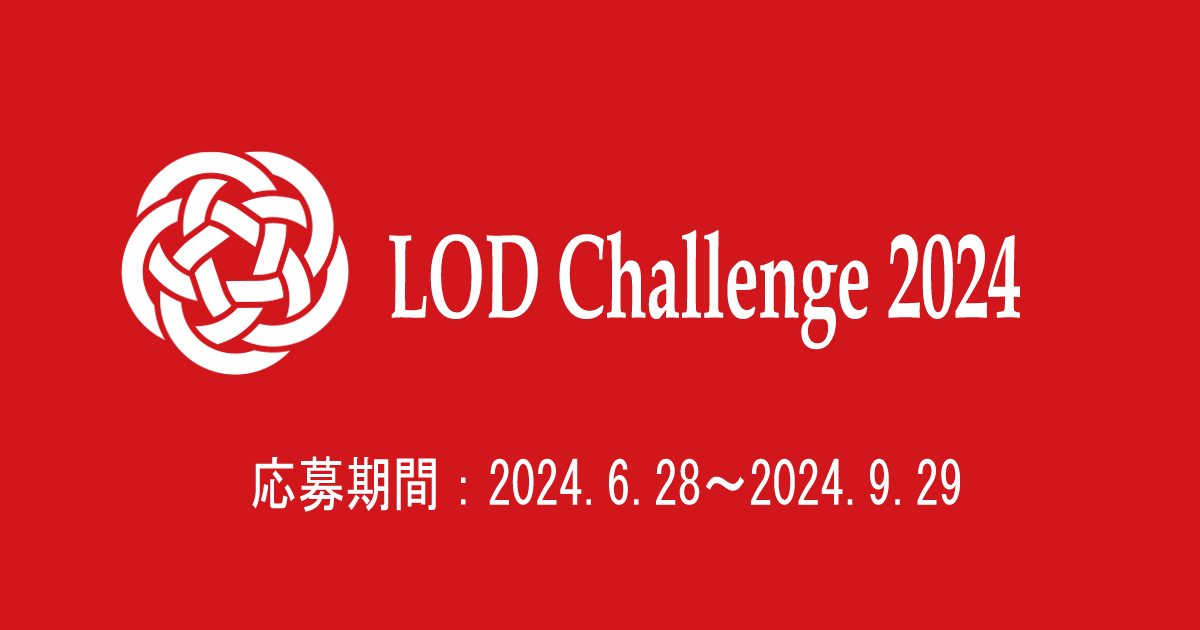
<style>
.page{position:relative;width:1200px;height:630px;background:#d1171c}
.page>*{position:absolute;margin:0}
.t1{font:120px "BookAntiqua-Bold";color:#ffffff;scale:0.56 1}
.t2{font:60px "MS-Gothic";color:#ffffff;scale:0.79 1}
</style>
<div class="page">
<p class="t1" style="left:389px;top:230px;width:631px;height:120px">LOD Challenge 2024</p>
<p class="t2" style="left:252px;top:456px;width:709px;height:56px">応募期間：2024.6.28～2024.9.29</p>
</div>
